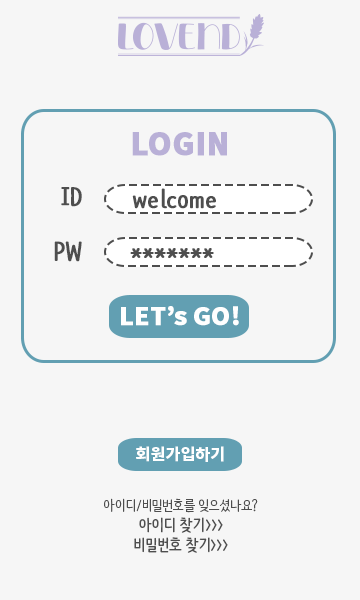
<style>
.page{position:relative;width:360px;height:600px;background:#f6f6f6}
.page>*{position:absolute;margin:0}
.t1{font:30px "NotoSansKR-Black";color:#b9b0d7;font-weight:bold}
.t2{font:24px "NanumBarunpenOTF-Bold";color:#4e4e4e;font-weight:bold}
.t3{font:24px "NotoSansKR-Black";color:#ffffff;font-weight:bold}
.t4{font:16px "NotoSansKR-Black";color:#ffffff}
.t5{font:16px/20px "NanumBarunpenOTF-Bold";color:#4e4e4e}
.t6{font:14px/20px "NanumBarunpenOTF";color:#4e4e4e}
</style>
<div class="page">
<p class="t1" style="left:132px;top:132px;width:95px;height:24px">LOGIN</p>
<p class="t2" style="left:61px;top:187px;width:21px;height:20px">ID</p>
<p class="t2" style="left:132px;top:188px;width:84px;height:21px">welcome</p>
<p class="t2" style="left:54px;top:241px;width:28px;height:21px">PW</p>
<p class="t2" style="left:130px;top:248px;width:84px;height:10px">*******</p>
<p class="t3" style="left:121px;top:306px;width:118px;height:20px">LET’s GO!</p>
<p class="t4" style="left:136px;top:446px;width:88px;height:16px">회원가입하기</p>
<p class="t5" style="left:104px;top:498px;width:154px;height:55px;text-align:center"><span class="t6">아이디/비밀번호를 잊으셨나요?<br></span>아이디 찾기&gt;&gt;&gt;<br>비밀번호 찾기&gt;&gt;&gt;</p>
</div>
